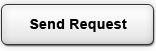
<style>
.page{position:relative;width:156px;height:51px}
.page>*{position:absolute;margin:0}
.t1{font:14px "Arial-BoldMT";letter-spacing:0.025em;color:#010101}
</style>
<div class="page">
<p class="t1" style="left:30px;top:19px;width:97px;height:13px">Send Request</p>
</div>
